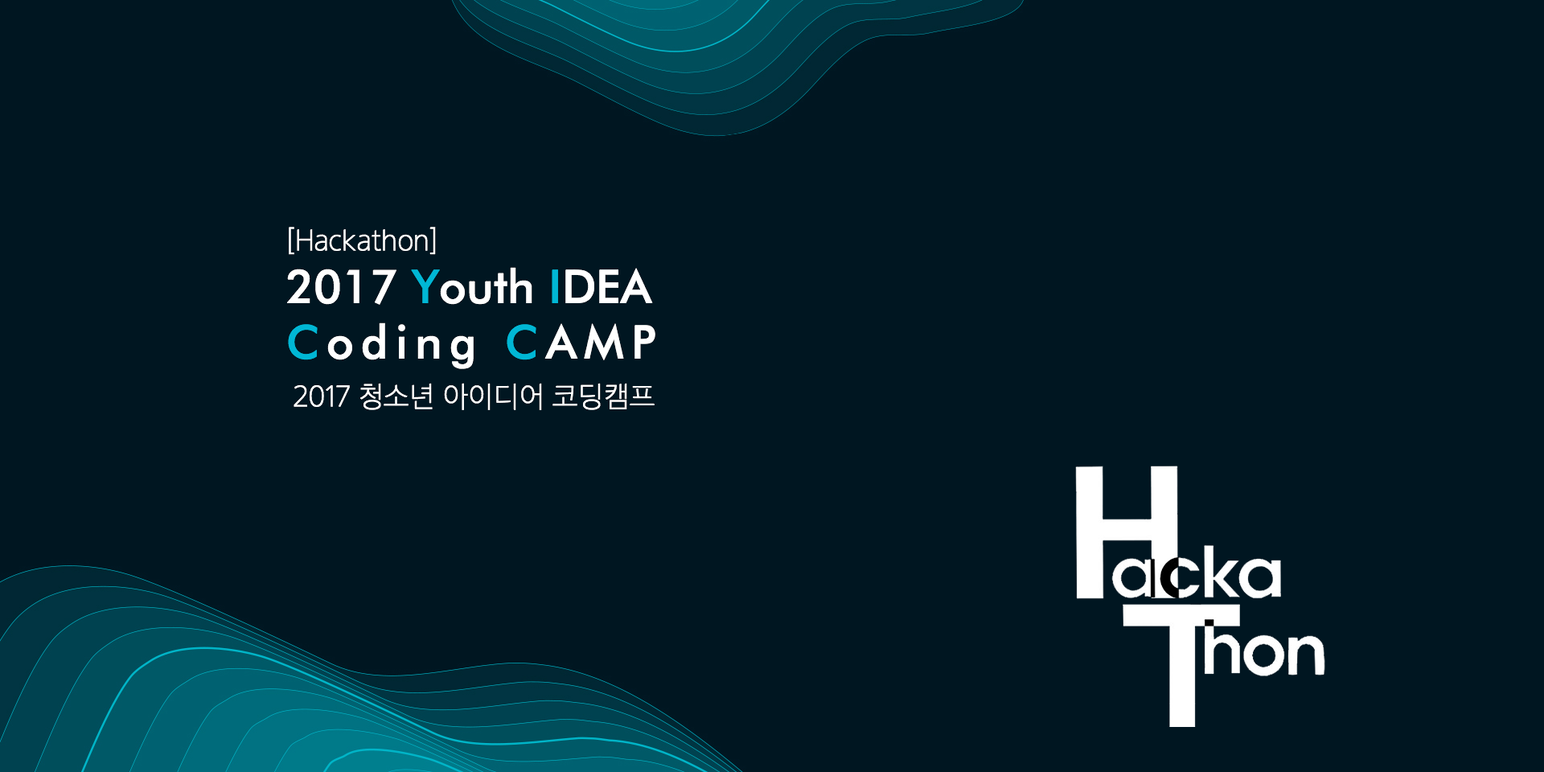
<style>
.page{position:relative;width:1544px;height:772px;background:#001621}
.page>*{position:absolute;margin:0}
.t1{font:27.8px "SECGCOTFUL";letter-spacing:0.02em;color:#ffffff}
.t2{font:46.3px "FuturaBT-Medium";letter-spacing:0.16em;color:#ffffff}
.t3{font:46.3px "FuturaBT-Medium";color:#ffffff}
.t4{font:46.3px "FuturaBT-Medium";color:#00b7d5}
.t5{font:46.3px "FuturaBT-Medium";letter-spacing:0.16em;color:#00b7d5}
</style>
<div class="page">
<p class="t1" style="left:289px;top:227px;width:147px;height:28px">[Hackathon]</p>
<p class="t2" style="left:287px;top:267px;width:369px;height:102px"><span class="t3">2017 </span><span class="t4">Y</span><span class="t3">outh</span><span class="t4"> I</span><span class="t3">DEA <br></span><span class="t5">C</span>oding <span class="t5">C</span>AMP</p>
<p class="t1" style="left:294px;top:383px;width:361px;height:27px">2017 청소년 아이디어 코딩캠프</p>
</div>
